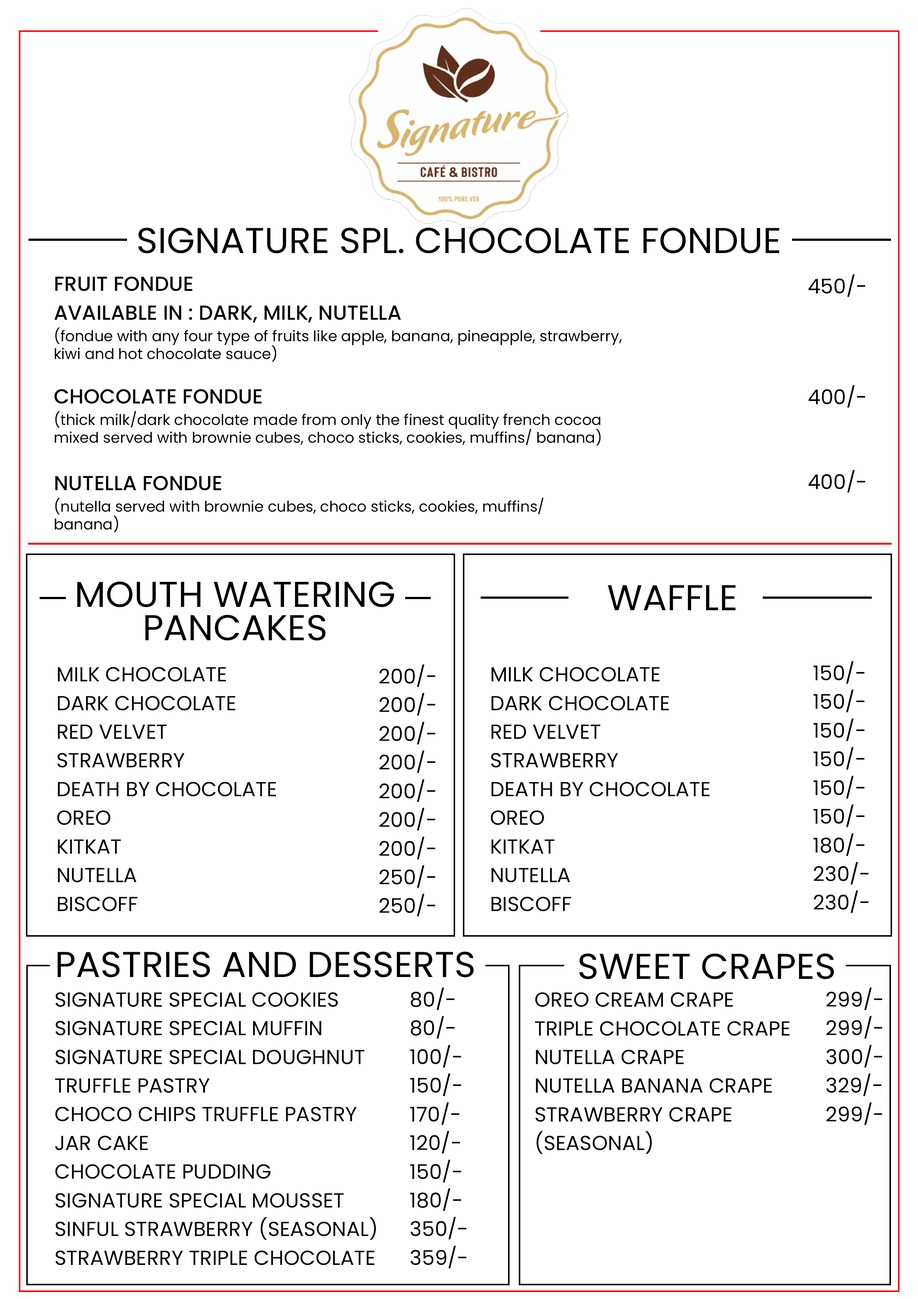
<style>
.page{position:relative;width:918px;height:1299px;background:#ffffff}
.page>*{position:absolute;margin:0}
.t1{font:35.9px "Poppins-Regular";color:#000000;text-transform:uppercase}
.t2{font:14.8px/17.8px "Poppins-Regular";color:#000000}
.t3{font:20.4px/28.7px "Poppins-Medium";color:#000000}
.t4{font:20.4px "Poppins-Regular";color:#000000}
.t5{font:35.9px/33.3px "Poppins-Regular";color:#000000;text-transform:uppercase}
.t6{font:20.4px/28.7px "Poppins-Regular";color:#000000}
.t7{font:20.4px/28.7px "Poppins-Regular";color:#000000;text-transform:uppercase}
</style>
<div class="page">
<p class="t1" style="left:138px;top:227px;width:642px;height:26px">SIGNATURE SPL. CHOCOLATE FONDUE</p>
<p class="t2" style="left:54px;top:276px;width:568px;height:86px"><span class="t3">FRUIT FONDUE<br>AVAILABLE IN : DARK, MILK, NUTELLA<br></span>(fondue with any four type of fruits like apple, banana, pineapple, strawberry, <br>kiwi and hot chocolate sauce)</p>
<p class="t4" style="left:809px;top:274px;width:57px;height:23px">450/-</p>
<p class="t2" style="left:54px;top:389px;width:547px;height:57px"><span class="t3">CHOCOLATE FONDUE<br></span>(thick milk/dark chocolate made from only the finest quality french cocoa<br>mixed served with brownie cubes, choco sticks, cookies, muffins/ banana)</p>
<p class="t4" style="left:809px;top:385px;width:57px;height:23px">400/-</p>
<p class="t4" style="left:809px;top:470px;width:57px;height:23px">400/-</p>
<p class="t2" style="left:55px;top:476px;width:489px;height:56px"><span class="t3">NUTELLA FONDUE<br></span>(nutella served with brownie cubes, choco sticks, cookies, muffins/<br>banana)</p>
<p class="t5" style="left:77px;top:581px;width:317px;height:59px;text-align:center">MOUTH WATERING<br>PANCAKES</p>
<p class="t1" style="left:608px;top:585px;width:128px;height:25px">Waffle</p>
<p class="t6" style="left:379px;top:664px;width:57px;height:252px">200/-<br>200/-<br>200/-<br>200/-<br>200/-<br>200/-<br>200/-<br>250/-<br>250/-</p>
<p class="t6" style="left:814px;top:661px;width:55px;height:252px">150/-<br>150/-<br>150/-<br>150/-<br>150/-<br>150/-<br>180/-<br>230/-<br>230/-</p>
<p class="t7" style="left:57px;top:667px;width:219px;height:244px">Milk Chocolate<br>Dark Chocolate<br>Red Velvet<br>Strawberry<br>Death By Chocolate<br>Oreo<br>Kitkat<br>Nutella<br>Biscoff</p>
<p class="t7" style="left:491px;top:667px;width:219px;height:244px">Milk Chocolate<br>Dark Chocolate<br>Red Velvet<br>Strawberry<br>Death By Chocolate<br>Oreo<br>Kitkat<br>Nutella<br>Biscoff</p>
<p class="t1" style="left:57px;top:951px;width:417px;height:26px">PASTRIES AND DESSERTS</p>
<p class="t1" style="left:579px;top:953px;width:255px;height:26px">Sweet CRAPES</p>
<p class="t6" style="left:410px;top:987px;width:57px;height:281px">80/-<br>80/-<br>100/-<br>150/-<br>170/-<br>120/-<br>150/-<br>180/-<br>350/-<br>359/-</p>
<p class="t6" style="left:826px;top:987px;width:57px;height:138px">299/-<br>299/-<br>300/-<br>329/-<br>299/-</p>
<p class="t7" style="left:55px;top:992px;width:321px;height:273px">SIGNATURE SPECIAL COOKIES<br>SIGNATURE SPECIAL MUFFIN<br>SIGNATURE SPECIAL DOUGHNUT<br>Truffle PAstry<br>Choco chips Truffle Pastry<br>Jar Cake<br>CHOCOLATE PUDDING<br>SIGNATURE SPECIAL MOUSSEt<br>Sinful Strawberry (SEASONAL)<br>Strawberry Triple Chocolate</p>
<p class="t7" style="left:535px;top:992px;width:255px;height:162px">Oreo cream Crape<br>Triple Chocolate Crape<br>Nutella Crape<br>Nutella Banana Crape<br>Strawberry Crape<br>(Seasonal)</p>
</div>
